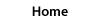
<style>
.page{position:relative;width:100px;height:23px;background:#ffffff}
.page>*{position:absolute;margin:0}
.t1{font:14px "MyriadPro-Semibold";color:#000000}
</style>
<div class="page">
<p class="t1" style="left:32px;top:6px;width:36px;height:10px">Home</p>
</div>
